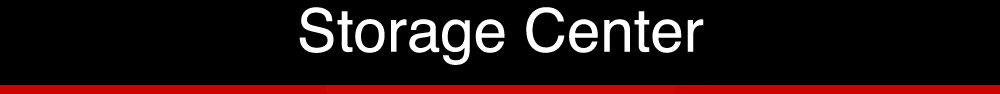
<style>
.page{position:relative;width:1000px;height:94px;background:#000000}
.page>*{position:absolute;margin:0}
.t1{font:60px "Helvetica";color:#ffffff}
</style>
<div class="page">
<p class="t1" style="left:299px;top:7px;width:405px;height:58px">Storage Center</p>
</div>
